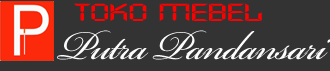
<style>
.page{position:relative;width:330px;height:71px;background:#333333}
.page>*{position:absolute;margin:0}
.t1{font:24px "DigifaceWide";letter-spacing:-0.025em;color:#ff0000;scale:1.11 1}
.t2{font:63.3px "BickhamScriptPro-Regular";letter-spacing:-0.025em;color:#fdfcfc}
</style>
<div class="page">
<p class="t1" style="left:74px;top:3px;width:188px;height:18px">Toko Mebel</p>
<p class="t2" style="left:57px;top:30px;width:274px;height:30px">Putra Pandansari</p>
</div>
